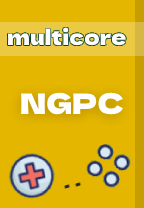
<style>
.page{position:relative;width:144px;height:208px;background:#e4b600}
.page>*{position:absolute;margin:0}
.t1{font:21px "DelaGothicOne-Regular";color:#ffffff}
.t2{font:28.4px "DelaGothicOne-Regular";color:#ffffff}
</style>
<div class="page">
<p class="t1" style="left:7px;top:27px;width:119px;height:19px">multicore</p>
<p class="t2" style="left:21px;top:92px;width:102px;height:23px">NGPC</p>
</div>
